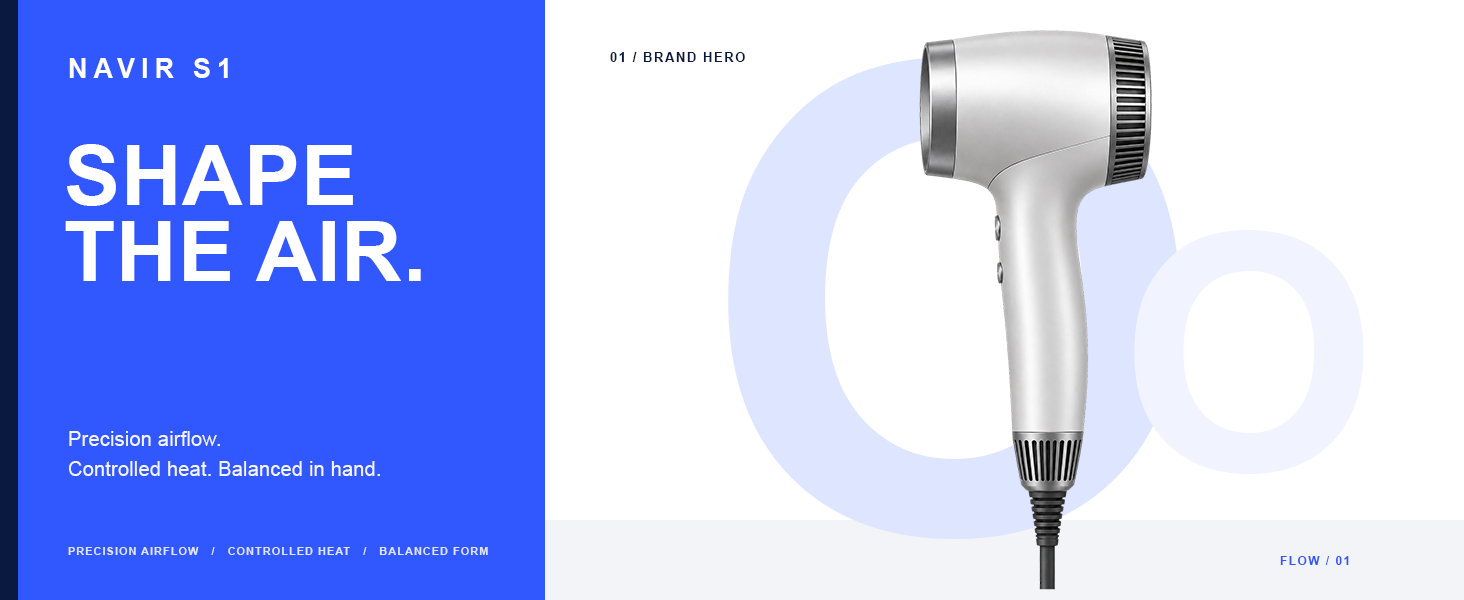
<style>
.page{position:relative;width:1464px;height:600px;background:#ffffff}
.page>*{position:absolute;margin:0}
.t1{font:13px "Arial-BoldMT";letter-spacing:0.12em;color:#0a1940}
.t2{font:27px "Arial-BoldMT";letter-spacing:0.22em;color:#ffffff}
.t3{font:84px/76px "Arial-BoldMT";letter-spacing:0.01em;color:#ffffff}
.t4{font:330px "Arial-BoldMT";letter-spacing:-0.06em;color:#f1f4ff}
.t5{font:20px/30px "ArialMT";letter-spacing:0.01em;color:#ffffff}
.t6{font:11px "Arial-BoldMT";letter-spacing:0.09em;color:#dde5ff}
.t7{font:12px "Arial-BoldMT";letter-spacing:0.12em;color:#3157ff}
</style>
<div class="page">
<p class="t1" style="left:610px;top:52px;width:135px;height:10px">01 / BRAND HERO</p>
<p class="t2" style="left:69px;top:58px;width:159px;height:20px">NAVIR S1</p>
<p class="t3" style="left:65px;top:144px;width:356px;height:137px">SHAPE<br>THE AIR.</p>
<p class="t4" style="left:1134px;top:230px;width:230px;height:244px">O</p>
<p class="t5" style="left:68px;top:431px;width:312px;height:45px;opacity:0.92">Precision airflow.<br>Controlled heat. Balanced in hand.</p>
<p class="t6" style="left:68px;top:547px;width:420px;height:8px">PRECISION AIRFLOW   /   CONTROLLED HEAT   /   BALANCED FORM</p>
<p class="t7" style="left:1280px;top:556px;width:69px;height:9px">FLOW / 01</p>
</div>
